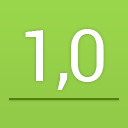
<style>
.page{position:relative;width:128px;height:128px}
.page>*{position:absolute;margin:0}
.t1{font:72px "Roboto-Regular";letter-spacing:-0.05em;color:#ffffff}
</style>
<div class="page">
<p class="t1" style="left:25px;top:29px;width:79px;height:61px">1,0</p>
</div>
